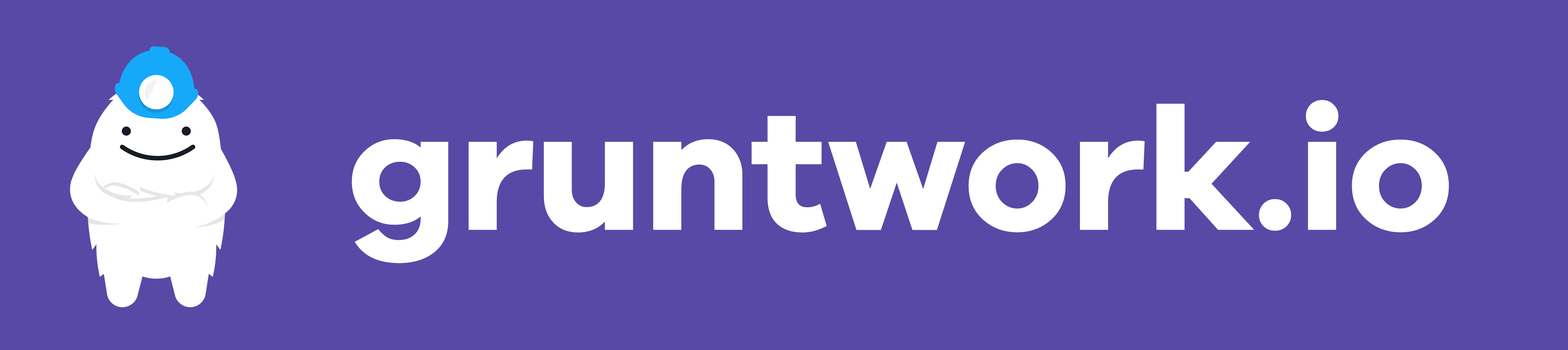
<style>
.page{position:relative;width:1568px;height:350px;background:#5849a6}
.page>*{position:absolute;margin:0}
.t1{font:175px "GalanoGrotesque-Bold";color:#ffffff}
</style>
<div class="page">
<p class="t1" style="left:352px;top:100px;width:1097px;height:163px">gruntwork.io</p>
</div>
